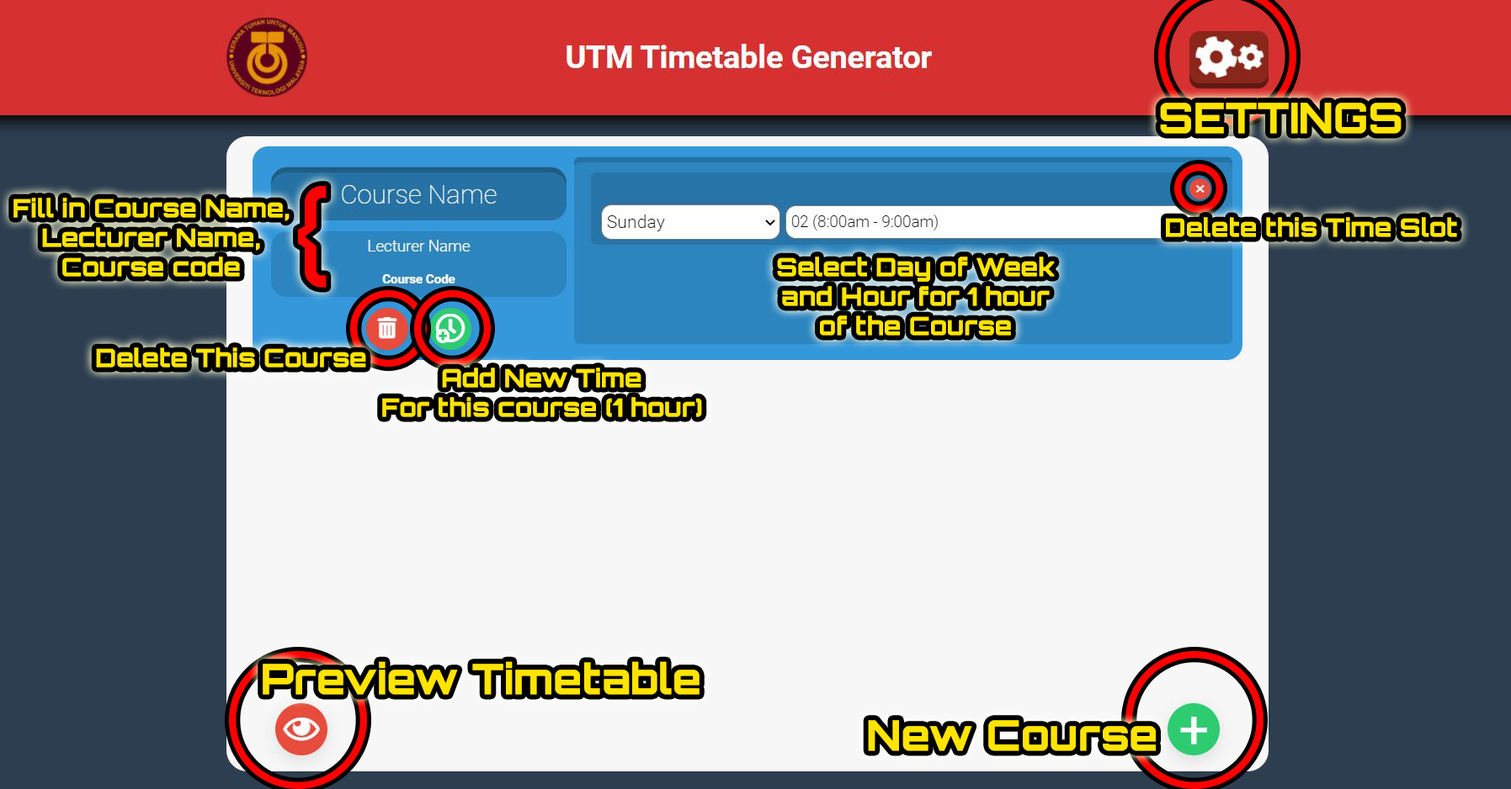
<style>
.page{position:relative;width:1511px;height:789px;background:#f7f7f7}
.page>*{position:absolute;margin:0}
.t1{font:42.1px "Orbitron-ExtraBold";color:#ffe400}
.t2{font:140.3px "Orbitron-Regular";color:#ff0000}
.t3{font:25.2px/29.5px "Orbitron-ExtraBold";color:#ffe400}
.t4{font:25.2px "Orbitron-ExtraBold";color:#ffe400}
</style>
<div class="page">
<p class="t1" style="left:1160px;top:103px;width:241px;height:31px">SETTINGS</p>
<p class="t2" style="left:298px;top:186px;width:29px;height:102px">{</p>
<p class="t3" style="left:13px;top:198px;width:276px;height:79px;text-align:center">Fill in Course Name,<br>Lecturer Name,<br>Course code</p>
<p class="t4" style="left:1166px;top:217px;width:291px;height:20px">Delete this Time Slot</p>
<p class="t3" style="left:777px;top:257px;width:277px;height:79px;text-align:center">Select Day of Week<br>and Hour for 1 hour<br>of the Course</p>
<p class="t4" style="left:96px;top:348px;width:270px;height:20px">Delete This Course</p>
<p class="t3" style="left:382px;top:368px;width:320px;height:49px;text-align:center">Add New Time<br>For this course (1 hour)</p>
<p class="t1" style="left:263px;top:661px;width:436px;height:34px">Preview Timetable</p>
<p class="t1" style="left:868px;top:720px;width:287px;height:32px">New Course</p>
</div>
